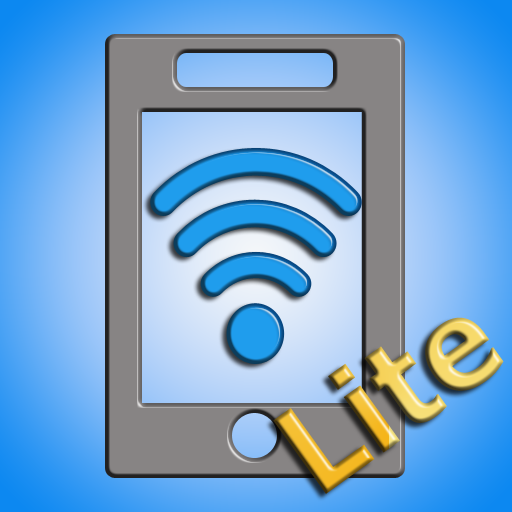
<style>
.page{position:relative;width:512px;height:512px}
.page>*{position:absolute;margin:0}
.t1{font:123.8px "Verdana-Bold";scale:0.91 1}
</style>
<div class="page">
<p class="t1" style="left:273px;top:317px;width:231px;height:177px;rotate:-36deg">Lite</p>
</div>
